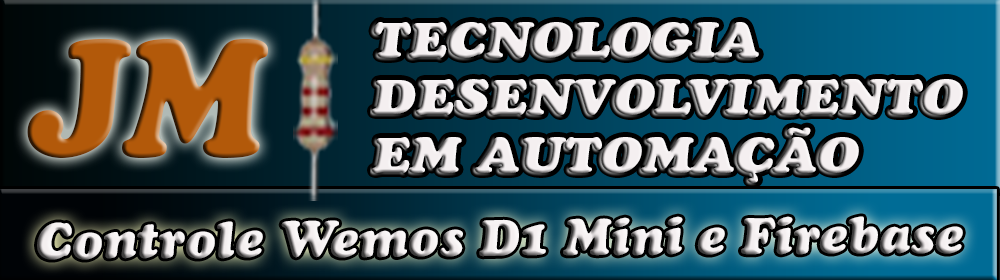
<style>
.page{position:relative;width:1000px;height:280px}
.page>*{position:absolute;margin:0}
.t1{font:48px "CooperBlackStd-Italic";color:#f4eff0;scale:1.14 1}
.t2{font:164.5px "CooperBlackStd-Italic";color:#b2590a;scale:0.93 1}
.t3{font:50.9px "CooperBlackStd-Italic"}
</style>
<div class="page">
<p class="t1" style="left:372px;top:22px;width:591px;height:161px">TECNOLOGIA<br>DESENVOLVIMENTO<br>EM AUTOMAÇÃO</p>
<p class="t2" style="left:27px;top:38px;width:241px;height:120px">JM</p>
<p class="t3" style="left:37px;top:216px;width:926px;height:44px">Controle Wemos D1 Mini e Firebase</p>
</div>
